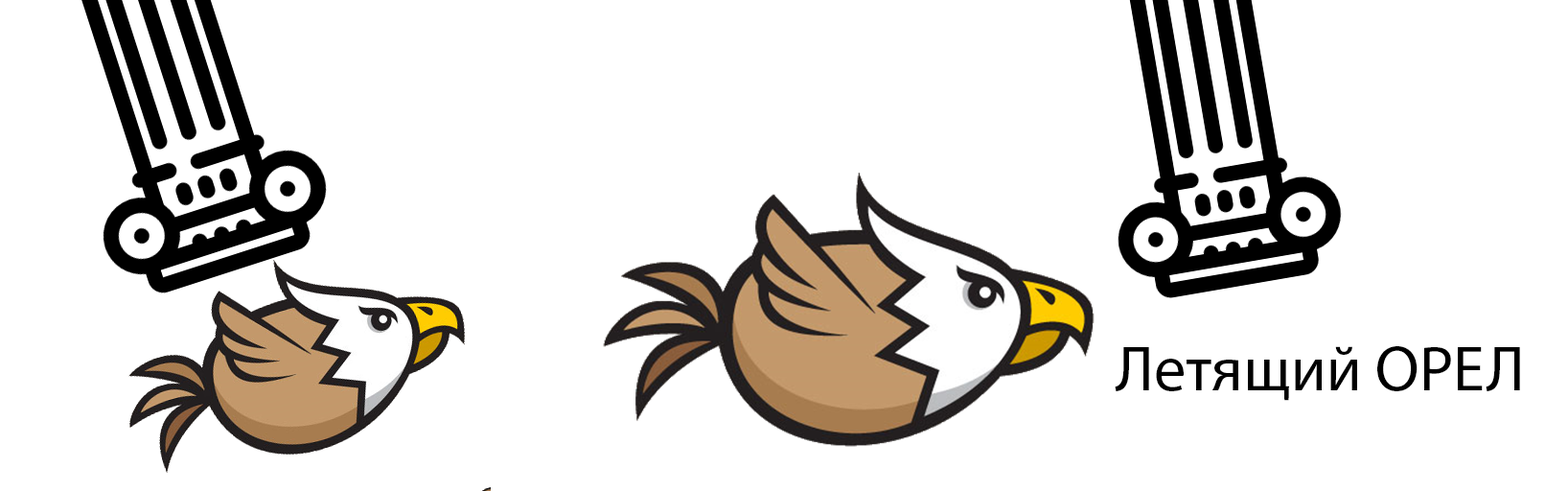
<style>
.page{position:relative;width:1568px;height:491px;background:#ffffff}
.page>*{position:absolute;margin:0}
.t1{font:63.9px "MyriadPro-Regular";color:#000000}
</style>
<div class="page">
<p class="t1" style="left:1115px;top:346px;width:405px;height:55px">Летящий ОРЕЛ</p>
</div>
